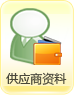
<style>
.page{position:relative;width:74px;height:95px}
.page>*{position:absolute;margin:0}
.t1{font:12px "MicrosoftYaHei";color:#4a473a}
</style>
<div class="page">
<p class="t1" style="left:6px;top:72px;width:61px;height:13px">供应商资料</p>
</div>
